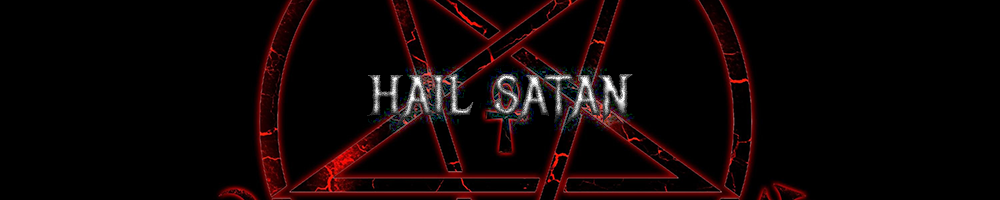
<style>
.page{position:relative;width:1000px;height:200px;background:#000000}
.page>*{position:absolute;margin:0}
.t1{font:70px "MetalMania-Regular"}
</style>
<div class="page">
<p class="t1" style="left:367px;top:74px;width:266px;height:52px">hail satan</p>
</div>
